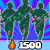
<style>
.page{position:relative;width:50px;height:50px;background:#0e5042}
.page>*{position:absolute;margin:0}
.t1{font:10px "MFWenYan_Noncommercial-Regular";letter-spacing:-0.06em;color:#ffffff}
</style>
<div class="page">
<p class="t1" style="left:19px;top:42px;width:22px;height:7px">1500</p>
</div>
